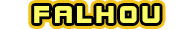
<style>
.page{position:relative;width:194px;height:30px;background:#ffffff}
.page>*{position:absolute;margin:0}
.t1{font:26.7px "DFSoGeiStd-W9";letter-spacing:0.135em;color:#fcfc65;scale:0.96 1}
</style>
<div class="page">
<p class="t1" style="left:34px;top:6px;width:126px;height:17px">FALHOU</p>
</div>
